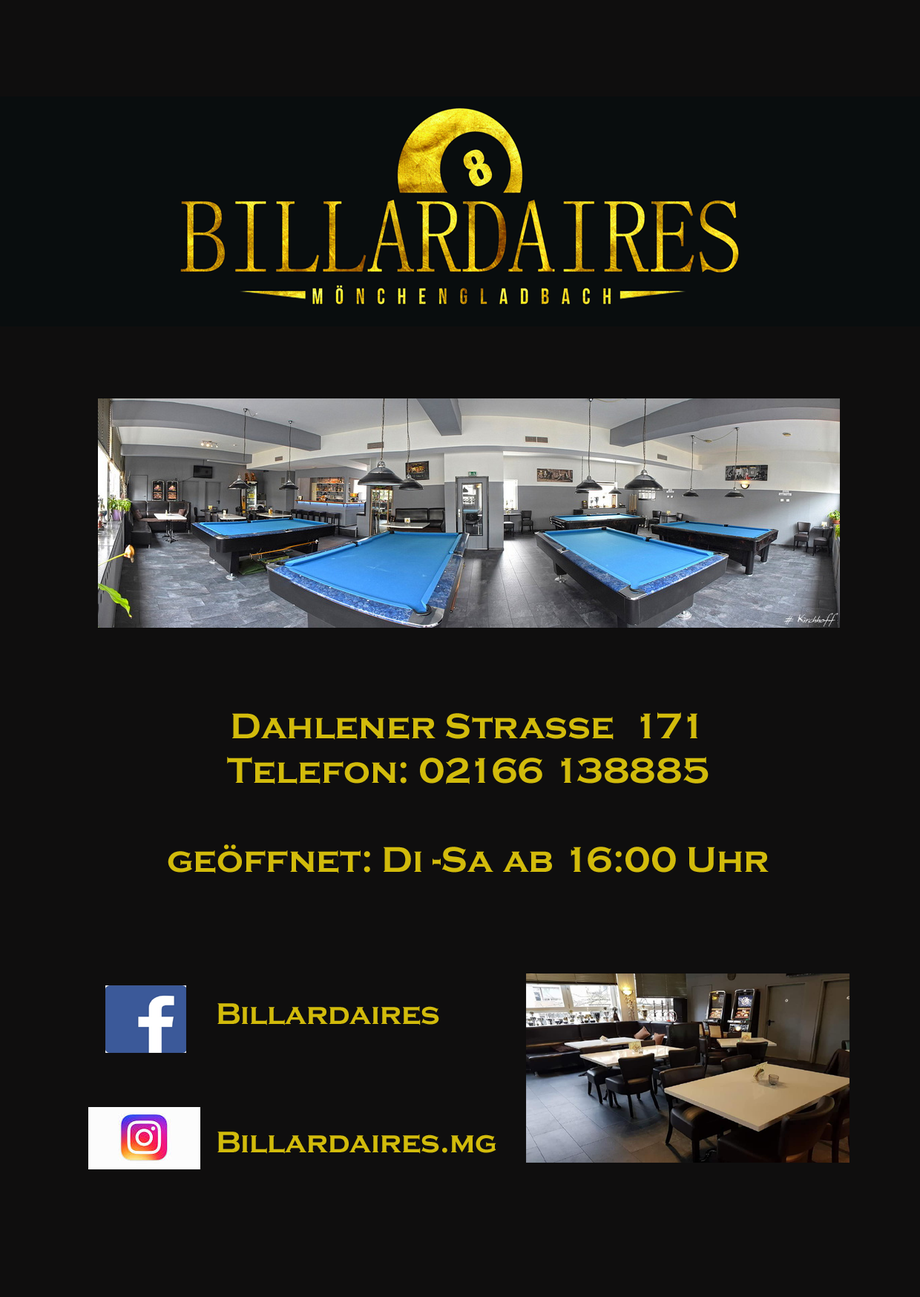
<style>
.page{position:relative;width:920px;height:1297px;background:#0f0e0e}
.page>*{position:absolute;margin:0}
.t1{font:37.1px "CopperplateGothic-Bold";color:#d2bb0b}
.t2{font:30.9px "CopperplateGothic-Bold";color:#d2bb0b}
</style>
<div class="page">
<p class="t1" style="left:168px;top:712px;width:600px;height:161px;text-align:center">Dahlener Strasse  171 <br>Telefon: 02166 138885 <br><br>geöffnet: Di -Sa ab 16:00 Uhr</p>
<p class="t2" style="left:217px;top:1003px;width:222px;height:22px">Billardaires</p>
<p class="t2" style="left:217px;top:1131px;width:279px;height:22px">Billardaires.mg</p>
</div>
